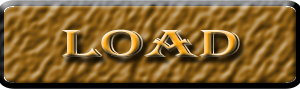
<style>
.page{position:relative;width:300px;height:89px}
.page>*{position:absolute;margin:0}
.t1{font:40.4px "Algerian";color:#ffa200;scale:1.76 1}
</style>
<div class="page">
<p class="t1" style="left:62px;top:29px;width:178px;height:29px">Load</p>
</div>
